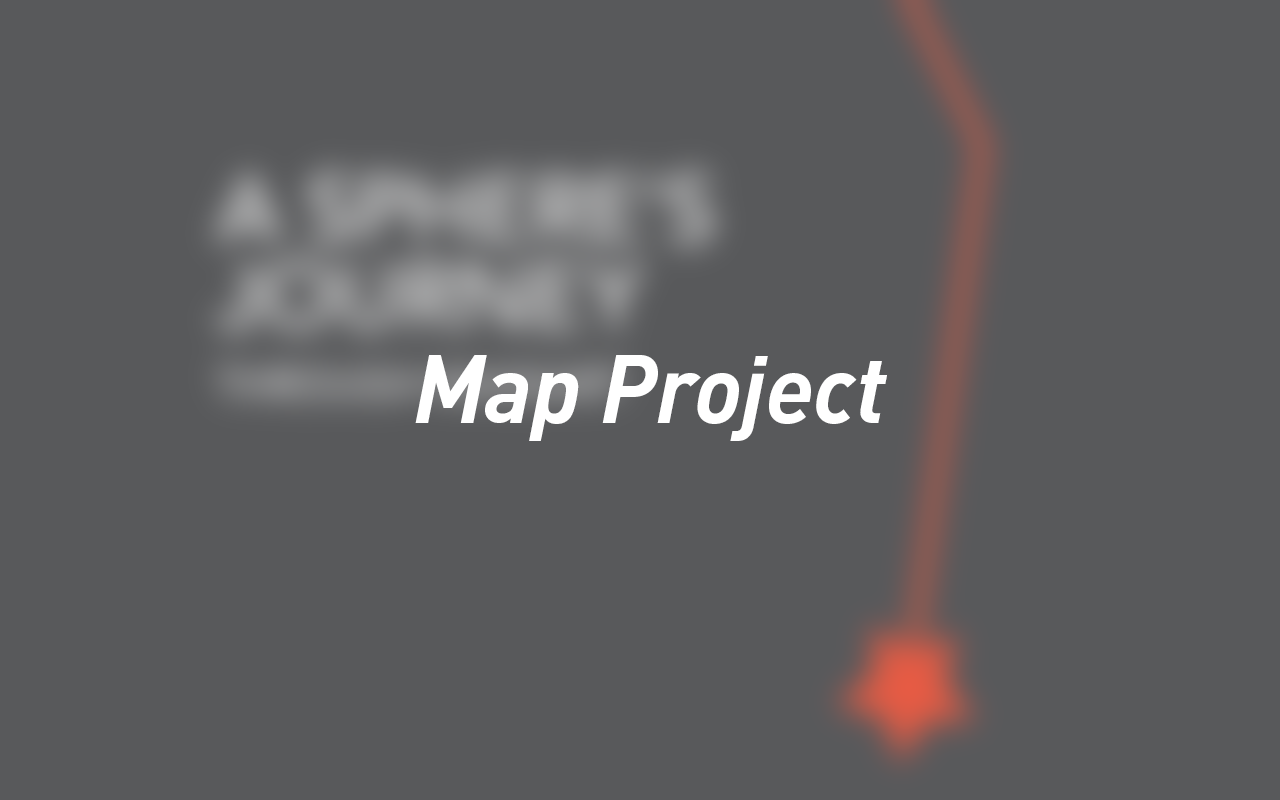
<style>
.page{position:relative;width:1280px;height:800px;background:#58595b}
.page>*{position:absolute;margin:0}
.t1{font:94.2px "DIN-BoldItalic";letter-spacing:-0.01em;color:#ffffff}
</style>
<div class="page">
<p class="t1" style="left:415px;top:355px;width:472px;height:86px">Map Project</p>
</div>
